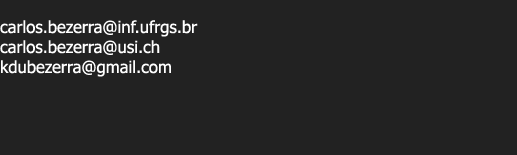
<style>
.page{position:relative;width:517px;height:155px;background:#222222}
.page>*{position:absolute;margin:0}
.t1{font:16.7px "Tahoma";color:#ffffff}
</style>
<div class="page">
<p class="t1" style="left:0px;top:20px;width:198px;height:57px">carlos.bezerra@inf.ufrgs.br<br>carlos.bezerra@usi.ch<br>kdubezerra@gmail.com</p>
</div>
